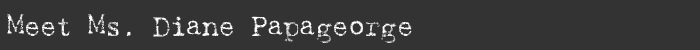
<style>
.page{position:relative;width:700px;height:50px;background:#333333}
.page>*{position:absolute;margin:0}
.t1{font:28px "Harting-Plain";letter-spacing:-0.025em;color:#ffffff}
</style>
<div class="page">
<p class="t1" style="left:7px;top:14px;width:405px;height:29px">Meet Ms. Diane Papageorge</p>
</div>
